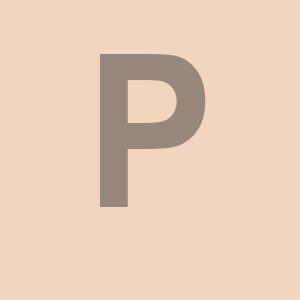
<style>
.page{position:relative;width:300px;height:300px;background:#f0d6c1}
.page>*{position:absolute;margin:0}
.t1{font:213.4px "Arial-BoldMT";color:#98877a;scale:0.9 1}
</style>
<div class="page">
<p class="t1" style="left:99px;top:54px;width:107px;height:153px">P</p>
</div>
